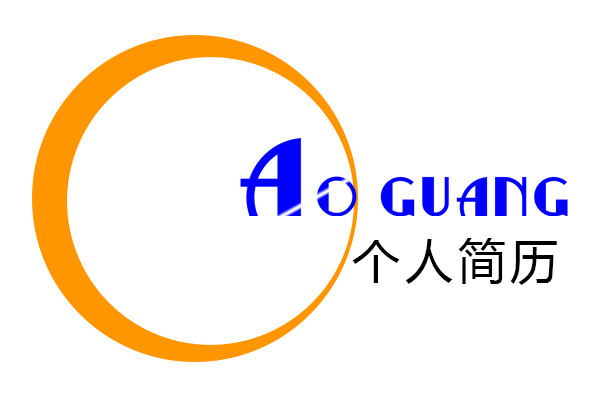
<style>
.page{position:relative;width:600px;height:400px;background:#ffffff}
.page>*{position:absolute;margin:0}
.t1{font:52.3px "RitzyRemix";letter-spacing:0.1em;color:#0000ff}
.t2{font:104.5px "RitzyRemix";letter-spacing:0.1em;color:#0000ff}
.t3{font:48px "MicrosoftYaHei";letter-spacing:0.1em;color:#000000}
</style>
<div class="page">
<p class="t1" style="left:240px;top:138px;width:328px;height:78px"><span class="t2">A</span>O GUANG</p>
<p class="t3" style="left:352px;top:238px;width:205px;height:47px">个人简历</p>
</div>
